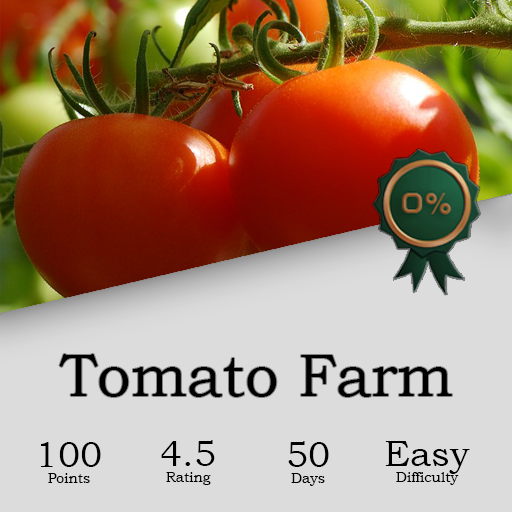
<style>
.page{position:relative;width:512px;height:512px;background:#dcdcdc}
.page>*{position:absolute;margin:0}
.t1{font:60px "BookmanOldStyle";color:#000000}
.t2{font:14px "BookmanOldStyle";color:#000000}
.t3{font:36px "BookmanOldStyle";color:#000000}
</style>
<div class="page">
<p class="t1" style="left:59px;top:354px;width:393px;height:43px">Tomato Farm</p>
<p class="t2" style="left:41px;top:442px;width:60px;height:41px;text-align:center"><span class="t3">100<br></span>Points</p>
<p class="t2" style="left:161px;top:440px;width:54px;height:45px;text-align:center"><span class="t3">4.5<br></span>Rating</p>
<p class="t2" style="left:288px;top:441px;width:41px;height:45px;text-align:center"><span class="t3">50<br></span>Days</p>
<p class="t2" style="left:385px;top:441px;width:85px;height:44px;text-align:center"><span class="t3">Easy<br></span>Difficulty</p>
</div>
